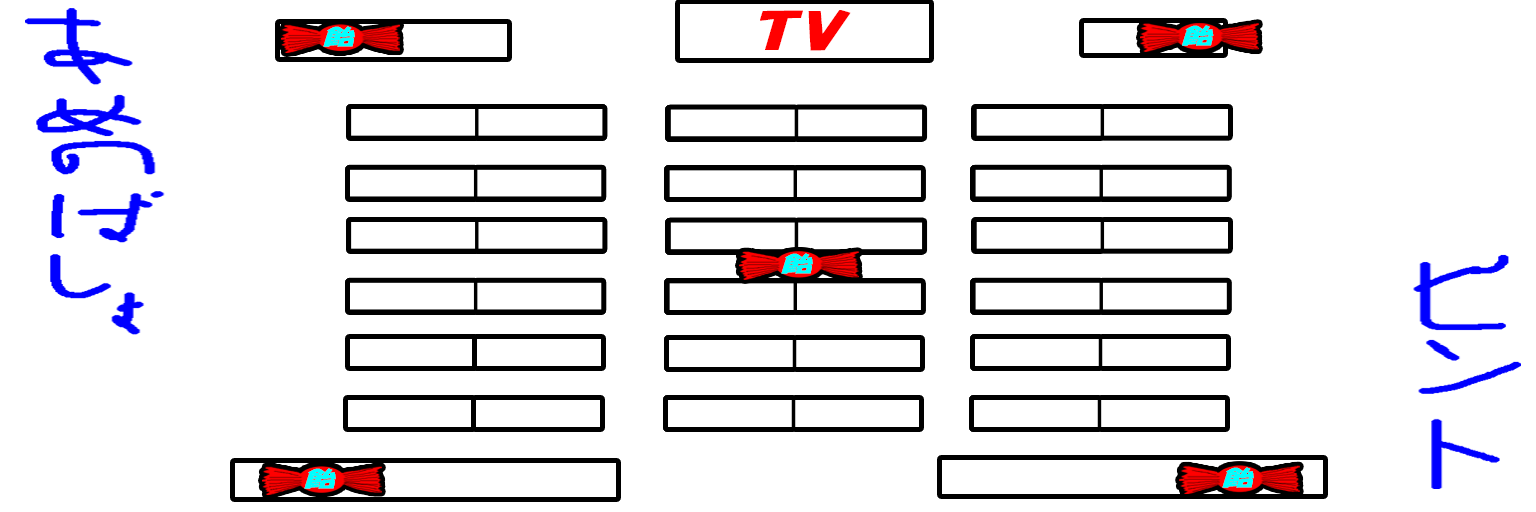
<style>
.page{position:relative;width:1536px;height:512px;background:#ffffff}
.page>*{position:absolute;margin:0}
.t1{font:48px "HGPSoeiKakupoptai";letter-spacing:0.05em;color:#ff0000;font-variant:small-caps;font-weight:bold;font-style:italic;scale:1.42 1}
.t2{font:21px "HGPSoeiKakupoptai";letter-spacing:0.05em;color:#00ffff;font-variant:small-caps;font-weight:bold;font-style:italic;scale:1.43 1}
</style>
<div class="page">
<p class="t1" style="left:760px;top:10px;width:91px;height:41px">TV</p>
<p class="t2" style="left:323px;top:26px;width:32px;height:21px">飴</p>
<p class="t2" style="left:1182px;top:25px;width:32px;height:21px">飴</p>
<p class="t2" style="left:781px;top:253px;width:32px;height:21px">飴</p>
<p class="t2" style="left:304px;top:468px;width:32px;height:21px">飴</p>
<p class="t2" style="left:1222px;top:467px;width:32px;height:21px">飴</p>
</div>
